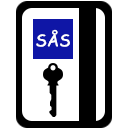
<style>
.page{position:relative;width:128px;height:128px;background:#ffffff}
.page>*{position:absolute;margin:0}
.t1{font:16.7px "ComicSansMS";color:#ffffff}
</style>
<div class="page">
<p class="t1" style="left:36px;top:29px;width:34px;height:18px">SÅS</p>
</div>
